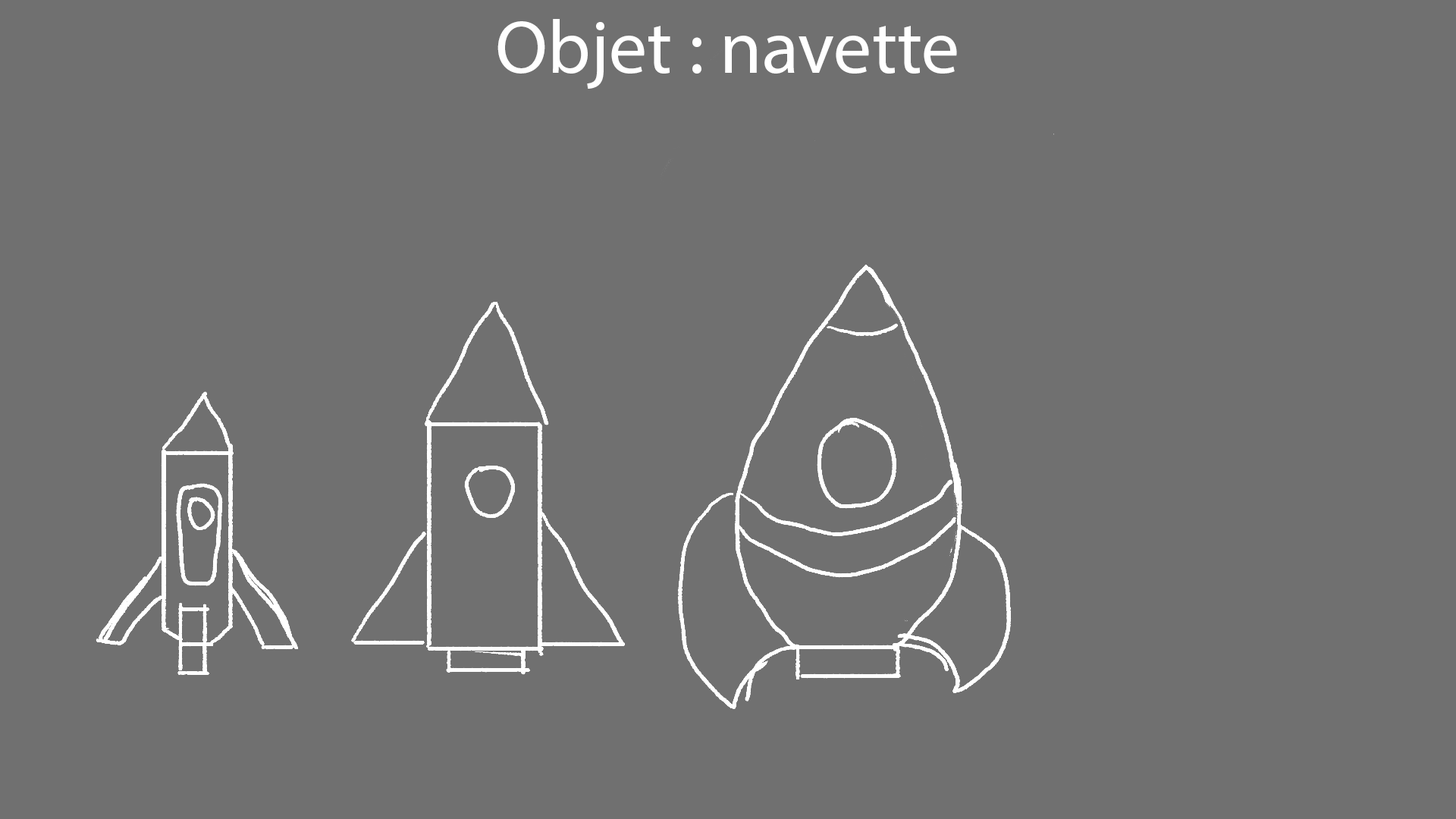
<style>
.page{position:relative;width:1456px;height:819px;background:#707070}
.page>*{position:absolute;margin:0}
.t1{font:75.8px "MyriadPro-Regular";color:#ffffff}
</style>
<div class="page">
<p class="t1" style="left:497px;top:19px;width:460px;height:70px">Objet : navette</p>
</div>
